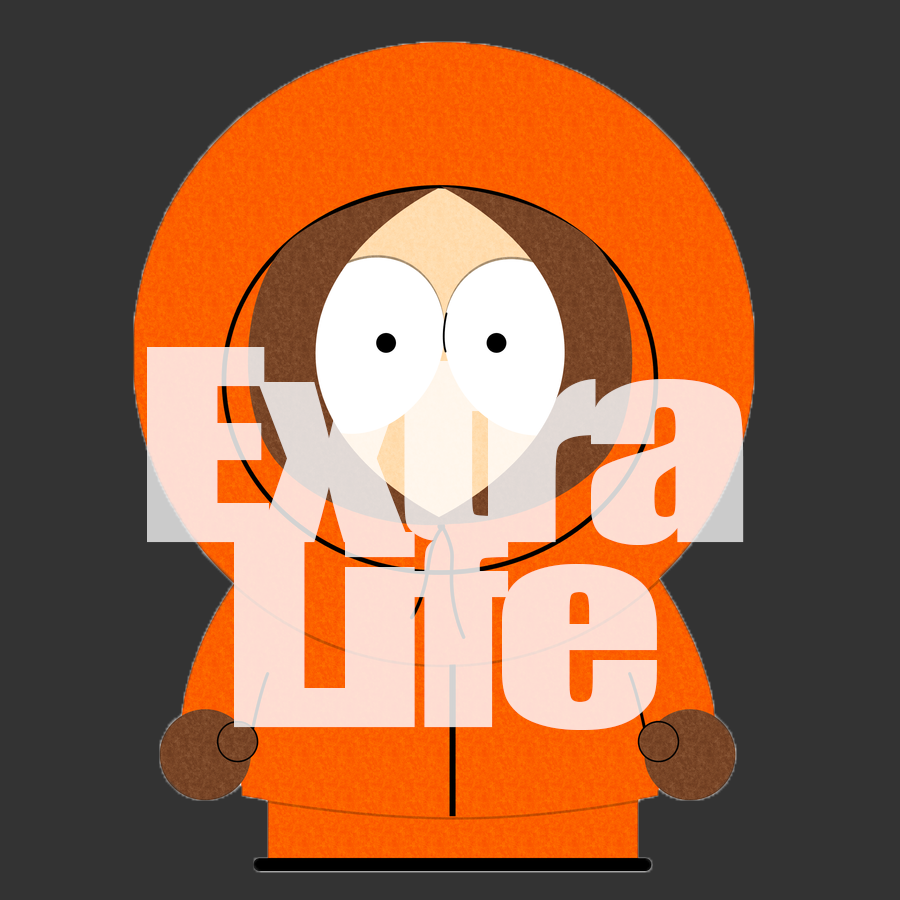
<style>
.page{position:relative;width:900px;height:900px;background:#333333}
.page>*{position:absolute;margin:0}
.t1{font:247.4px/185.5px "Impact";letter-spacing:-0.05em;scale:1.38 1}
</style>
<div class="page">
<p class="t1" style="left:147px;top:347px;width:597px;height:383px;text-align:center">Extra<br>Life</p>
</div>
